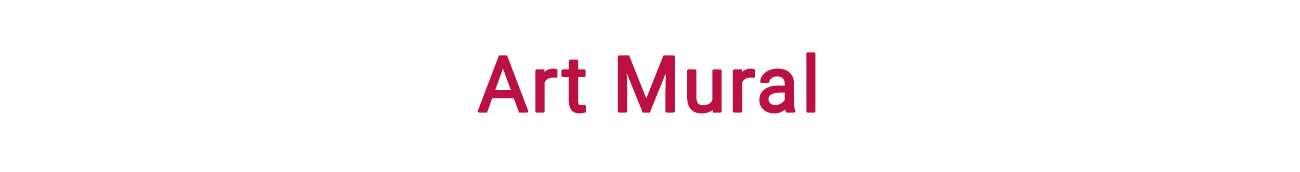
<style>
.page{position:relative;width:1300px;height:172px;background:#ffffff}
.page>*{position:absolute;margin:0}
.t1{font:77.6px "Roboto-Regular";letter-spacing:0.01em;color:#bc0f42;font-weight:bold}
</style>
<div class="page">
<p class="t1" style="left:477px;top:52px;width:339px;height:62px">Art Mural</p>
</div>
